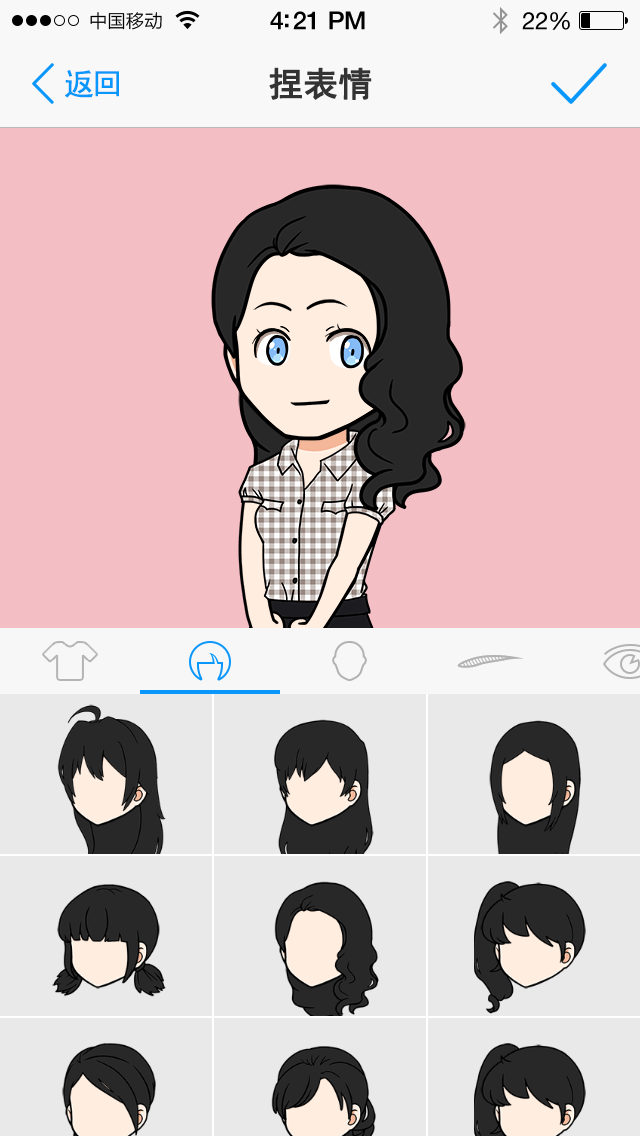
<style>
.page{position:relative;width:640px;height:1136px;background:#f3bec4}
.page>*{position:absolute;margin:0}
.t1{font:30px "SimHei";letter-spacing:-0.075em;color:#0a97fb;font-weight:bold}
.t2{font:34px "SimHei";letter-spacing:-0.01em;color:#333333;font-weight:bold}
</style>
<div class="page">
<p class="t1" style="left:65px;top:70px;width:54px;height:28px">返回</p>
<p class="t2" style="left:269px;top:67px;width:103px;height:33px">捏表情</p>
</div>
